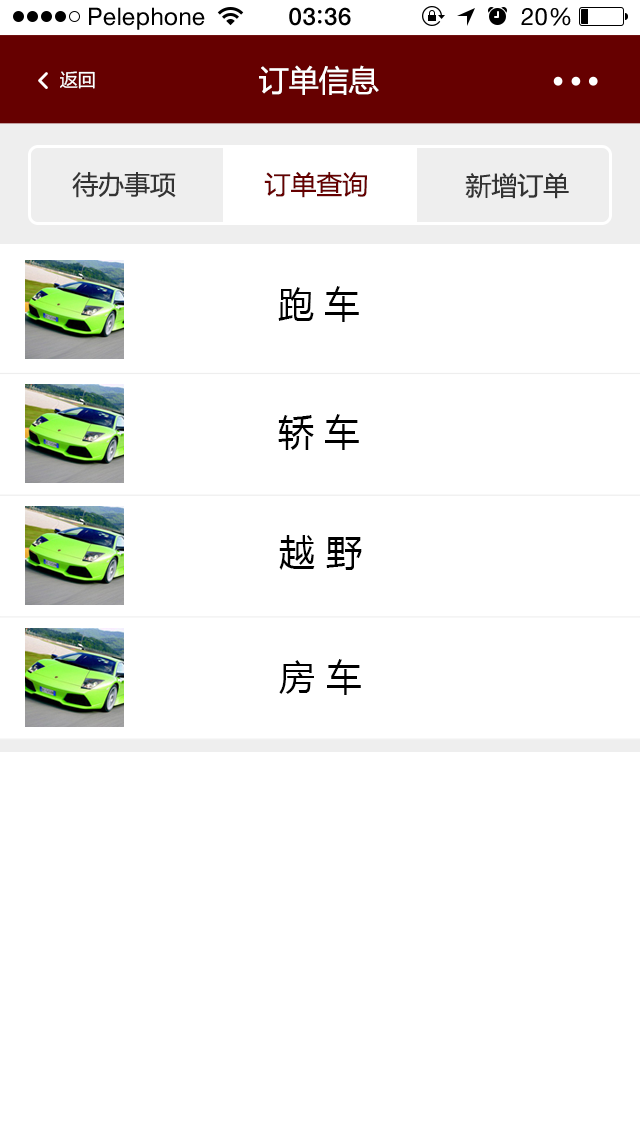
<style>
.page{position:relative;width:640px;height:1138px;background:#ffffff}
.page>*{position:absolute;margin:0}
.t1{font:24px "HelveticaNeue";letter-spacing:0.02em;color:#000000}
.t2{font:24px "HelveticaNeue-Medium";letter-spacing:0.03em;color:#000000}
.t3{font:29.9px "MicrosoftYaHei";color:#ffffff}
.t4{font:18px "MicrosoftYaHei";color:#ffffff}
.t5{font:25.8px "MicrosoftYaHei";color:#333333}
.t6{font:25.8px "MicrosoftYaHei";color:#660000}
.t7{font:36px "MicrosoftYaHei";color:#000000}
</style>
<div class="page">
<p class="t1" style="left:89px;top:7px;width:116px;height:23px">Pelephone</p>
<p class="t2" style="left:289px;top:7px;width:62px;height:19px">03 36</p>
<p class="t1" style="left:521px;top:7px;width:50px;height:19px">20%</p>
<p class="t3" style="left:259px;top:65px;width:120px;height:30px">订单信息</p>
<p class="t4" style="left:60px;top:71px;width:35px;height:18px">返回</p>
<p class="t5" style="left:72px;top:172px;width:104px;height:26px">待办事项</p>
<p class="t6" style="left:264px;top:172px;width:103px;height:26px">订单查询</p>
<p class="t5" style="left:465px;top:173px;width:104px;height:26px">新增订单</p>
<p class="t7" style="left:278px;top:286px;width:81px;height:36px">跑 车</p>
<p class="t7" style="left:278px;top:414px;width:81px;height:36px">轿 车</p>
<p class="t7" style="left:279px;top:535px;width:83px;height:35px">越 野</p>
<p class="t7" style="left:279px;top:659px;width:82px;height:36px">房 车</p>
</div>
